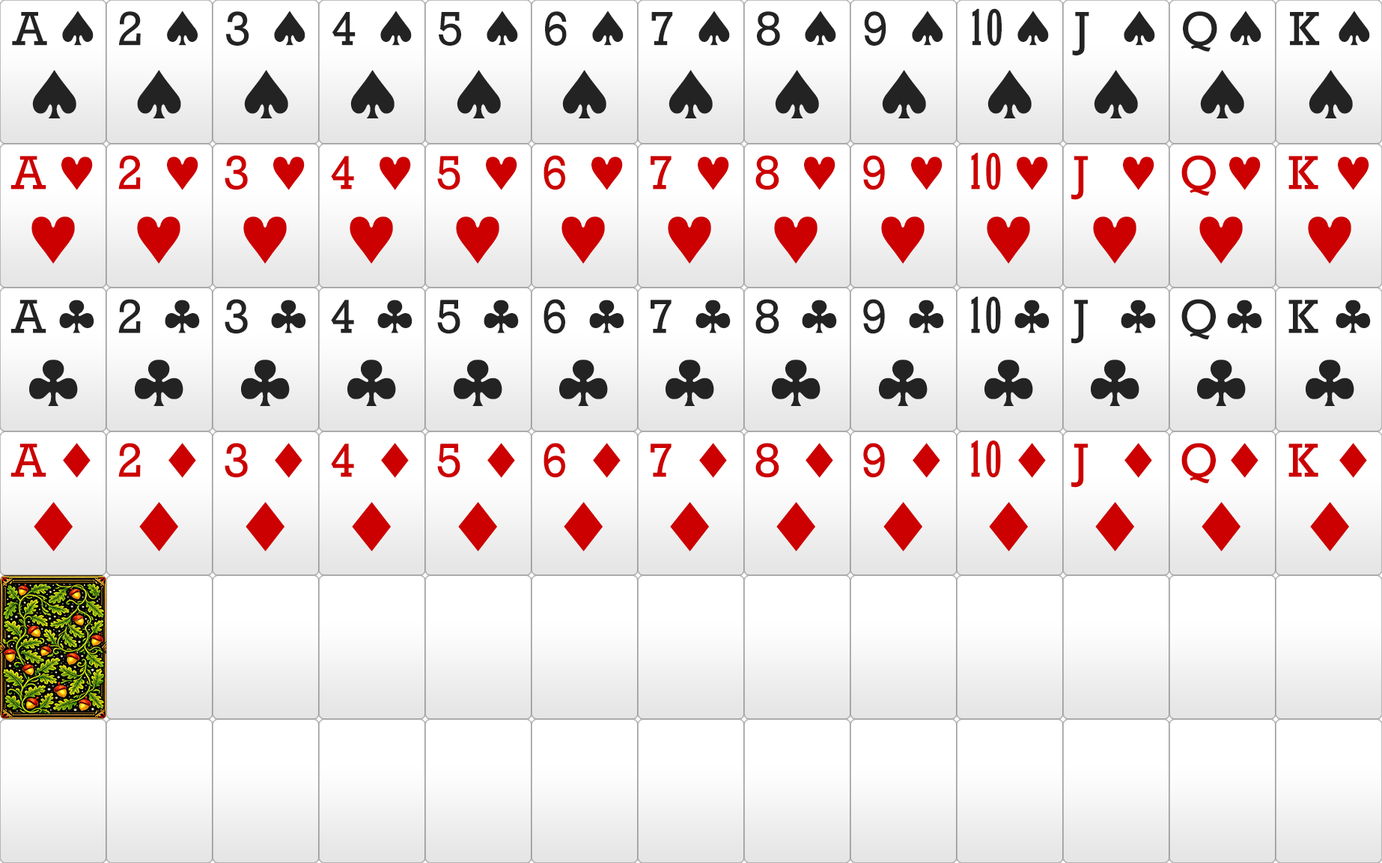
<style>
.page{position:relative;width:1382px;height:863px;background:#ffffff}
.page>*{position:absolute;margin:0}
.t1{font:48.7px "Rockwell";color:#232323}
.t2{font:59.9px "SymbolMT";color:#232323}
.t3{font:83.9px "SymbolMT";color:#232323}
.t4{font:48.7px "Rockwell-Condensed";color:#232323}
.t5{font:48.7px "Rockwell";color:#cc0000}
.t6{font:59.9px "SymbolMT";color:#cc0000}
.t7{font:83.9px "SymbolMT";color:#cc0000}
.t8{font:48.7px "Rockwell-Condensed";color:#cc0000}
</style>
<div class="page">
<p class="t1" style="left:12px;top:10px;width:82px;height:108px">A <span class="t2">♠<br></span><span class="t3">♠</span></p>
<p class="t1" style="left:119px;top:10px;width:79px;height:108px">2 <span class="t2">♠<br></span><span class="t3">♠</span></p>
<p class="t1" style="left:226px;top:10px;width:80px;height:108px">3 <span class="t2">♠<br></span><span class="t3">♠</span></p>
<p class="t1" style="left:332px;top:10px;width:80px;height:108px">4 <span class="t2">♠<br></span><span class="t3">♠</span></p>
<p class="t1" style="left:439px;top:10px;width:79px;height:108px">5 <span class="t2">♠<br></span><span class="t3">♠</span></p>
<p class="t1" style="left:545px;top:10px;width:79px;height:108px">6 <span class="t2">♠<br></span><span class="t3">♠</span></p>
<p class="t1" style="left:651px;top:10px;width:79px;height:108px">7 <span class="t2">♠<br></span><span class="t3">♠</span></p>
<p class="t1" style="left:757px;top:10px;width:79px;height:108px">8 <span class="t2">♠<br></span><span class="t3">♠</span></p>
<p class="t1" style="left:864px;top:10px;width:80px;height:108px">9 <span class="t2">♠<br></span><span class="t3">♠</span></p>
<p class="t4" style="left:973px;top:8px;width:76px;height:110px">10 <span class="t2">♠<br></span><span class="t3">♠</span></p>
<p class="t1" style="left:1072px;top:10px;width:83px;height:108px">J  <span class="t2">♠<br></span><span class="t3">♠</span></p>
<p class="t1" style="left:1183px;top:10px;width:79px;height:108px">Q <span class="t2">♠<br></span><span class="t3">♠</span></p>
<p class="t1" style="left:1290px;top:10px;width:80px;height:108px">K <span class="t2">♠<br></span><span class="t3">♠</span></p>
<p class="t5" style="left:10px;top:156px;width:83px;height:108px">A <span class="t6">♥<br></span><span class="t7">♥</span></p>
<p class="t5" style="left:118px;top:155px;width:80px;height:109px">2 <span class="t6">♥<br></span><span class="t7">♥</span></p>
<p class="t5" style="left:225px;top:155px;width:80px;height:109px">3 <span class="t6">♥<br></span><span class="t7">♥</span></p>
<p class="t5" style="left:331px;top:156px;width:80px;height:108px">4 <span class="t6">♥<br></span><span class="t7">♥</span></p>
<p class="t5" style="left:437px;top:156px;width:80px;height:108px">5 <span class="t6">♥<br></span><span class="t7">♥</span></p>
<p class="t5" style="left:544px;top:155px;width:79px;height:109px">6 <span class="t6">♥<br></span><span class="t7">♥</span></p>
<p class="t5" style="left:651px;top:156px;width:78px;height:108px">7 <span class="t6">♥<br></span><span class="t7">♥</span></p>
<p class="t5" style="left:756px;top:155px;width:80px;height:109px">8 <span class="t6">♥<br></span><span class="t7">♥</span></p>
<p class="t5" style="left:863px;top:155px;width:80px;height:109px">9 <span class="t6">♥<br></span><span class="t7">♥</span></p>
<p class="t8" style="left:971px;top:153px;width:77px;height:111px">10 <span class="t6">♥<br></span><span class="t7">♥</span></p>
<p class="t5" style="left:1072px;top:156px;width:83px;height:108px">J  <span class="t6">♥<br></span><span class="t7">♥</span></p>
<p class="t5" style="left:1182px;top:155px;width:79px;height:109px">Q <span class="t6">♥<br></span><span class="t7">♥</span></p>
<p class="t5" style="left:1289px;top:156px;width:81px;height:108px">K <span class="t6">♥<br></span><span class="t7">♥</span></p>
<p class="t1" style="left:10px;top:300px;width:84px;height:106px">A <span class="t2">♣<br></span><span class="t3">♣</span></p>
<p class="t1" style="left:118px;top:299px;width:82px;height:107px">2 <span class="t2">♣<br></span><span class="t3">♣</span></p>
<p class="t1" style="left:225px;top:299px;width:81px;height:107px">3 <span class="t2">♣<br></span><span class="t3">♣</span></p>
<p class="t1" style="left:331px;top:300px;width:82px;height:106px">4 <span class="t2">♣<br></span><span class="t3">♣</span></p>
<p class="t1" style="left:437px;top:300px;width:82px;height:106px">5 <span class="t2">♣<br></span><span class="t3">♣</span></p>
<p class="t1" style="left:544px;top:299px;width:81px;height:107px">6 <span class="t2">♣<br></span><span class="t3">♣</span></p>
<p class="t1" style="left:651px;top:300px;width:80px;height:106px">7 <span class="t2">♣<br></span><span class="t3">♣</span></p>
<p class="t1" style="left:756px;top:299px;width:81px;height:107px">8 <span class="t2">♣<br></span><span class="t3">♣</span></p>
<p class="t1" style="left:863px;top:299px;width:81px;height:107px">9 <span class="t2">♣<br></span><span class="t3">♣</span></p>
<p class="t4" style="left:971px;top:297px;width:79px;height:109px">10 <span class="t2">♣<br></span><span class="t3">♣</span></p>
<p class="t1" style="left:1072px;top:300px;width:84px;height:106px">J  <span class="t2">♣<br></span><span class="t3">♣</span></p>
<p class="t1" style="left:1182px;top:299px;width:81px;height:107px">Q <span class="t2">♣<br></span><span class="t3">♣</span></p>
<p class="t1" style="left:1289px;top:300px;width:82px;height:106px">K <span class="t2">♣<br></span><span class="t3">♣</span></p>
<p class="t5" style="left:10px;top:443px;width:81px;height:108px">A <span class="t6">♦<br></span><span class="t7">♦</span></p>
<p class="t5" style="left:118px;top:443px;width:78px;height:108px">2 <span class="t6">♦<br></span><span class="t7">♦</span></p>
<p class="t5" style="left:225px;top:443px;width:78px;height:108px">3 <span class="t6">♦<br></span><span class="t7">♦</span></p>
<p class="t5" style="left:331px;top:443px;width:78px;height:108px">4 <span class="t6">♦<br></span><span class="t7">♦</span></p>
<p class="t5" style="left:437px;top:443px;width:78px;height:108px">5 <span class="t6">♦<br></span><span class="t7">♦</span></p>
<p class="t5" style="left:544px;top:443px;width:77px;height:108px">6 <span class="t6">♦<br></span><span class="t7">♦</span></p>
<p class="t5" style="left:651px;top:443px;width:76px;height:108px">7 <span class="t6">♦<br></span><span class="t7">♦</span></p>
<p class="t5" style="left:756px;top:443px;width:77px;height:108px">8 <span class="t6">♦<br></span><span class="t7">♦</span></p>
<p class="t5" style="left:863px;top:443px;width:78px;height:108px">9 <span class="t6">♦<br></span><span class="t7">♦</span></p>
<p class="t8" style="left:971px;top:440px;width:75px;height:111px">10 <span class="t6">♦<br></span><span class="t7">♦</span></p>
<p class="t5" style="left:1072px;top:443px;width:80px;height:108px">J  <span class="t6">♦<br></span><span class="t7">♦</span></p>
<p class="t5" style="left:1182px;top:443px;width:77px;height:108px">Q <span class="t6">♦<br></span><span class="t7">♦</span></p>
<p class="t5" style="left:1289px;top:443px;width:78px;height:108px">K <span class="t6">♦<br></span><span class="t7">♦</span></p>
</div>
